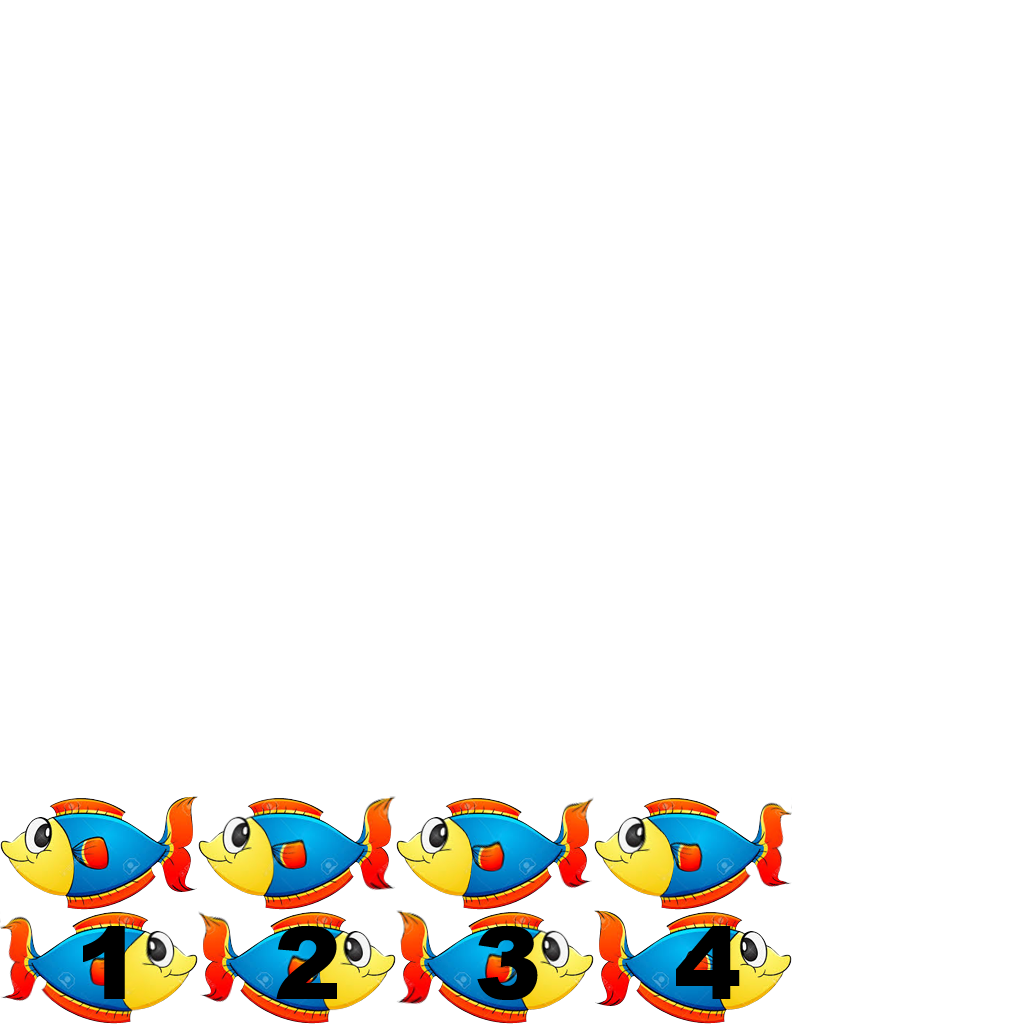
<style>
.page{position:relative;width:1024px;height:1024px;background:#ffffff}
.page>*{position:absolute;margin:0}
.t1{font:101px "Arial-Black";color:#000000}
</style>
<div class="page">
<p class="t1" style="left:83px;top:926px;width:42px;height:73px">1</p>
<p class="t1" style="left:276px;top:926px;width:61px;height:73px">2</p>
<p class="t1" style="left:477px;top:926px;width:61px;height:74px">3</p>
<p class="t1" style="left:676px;top:926px;width:64px;height:73px">4</p>
</div>
